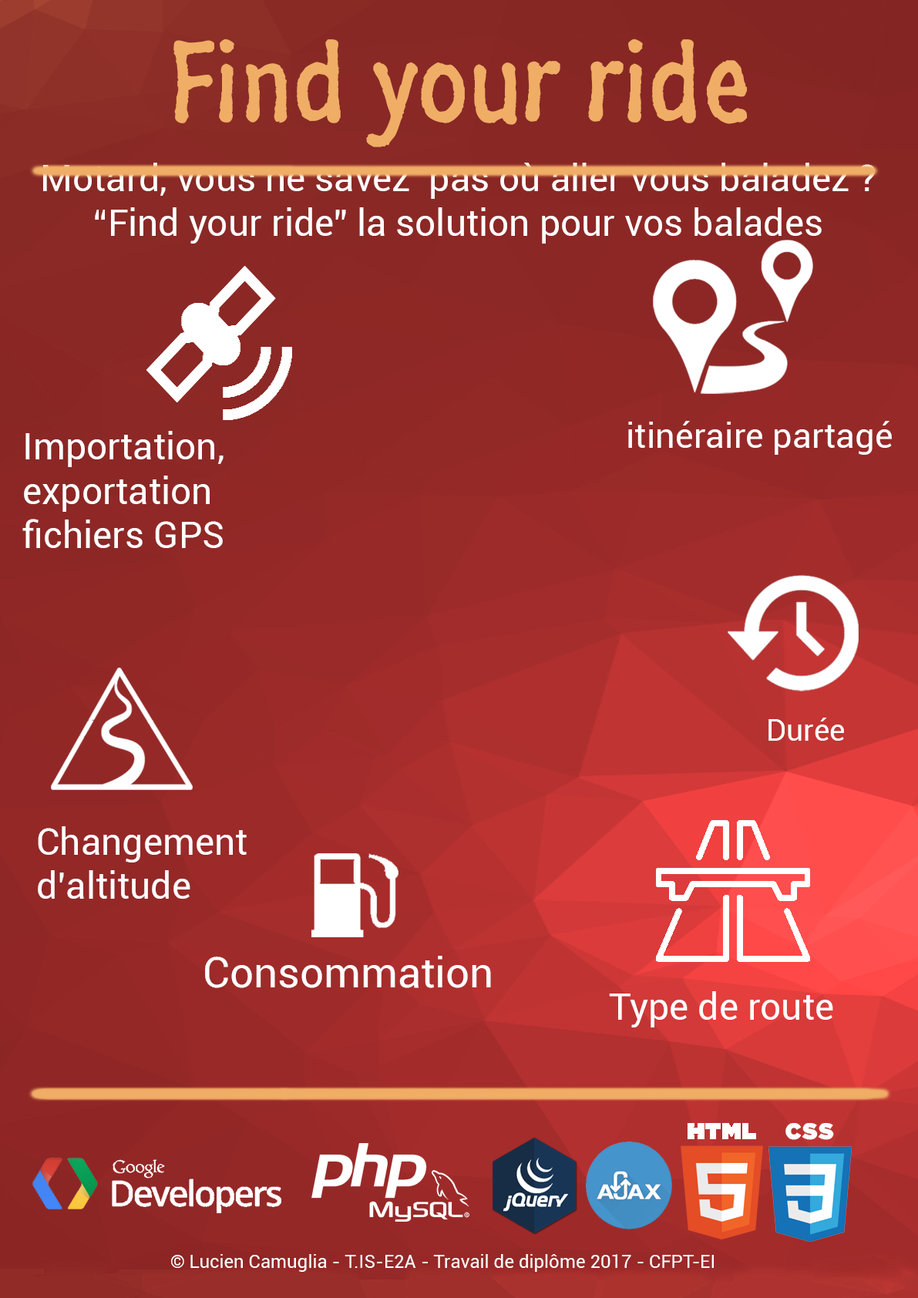
<style>
.page{position:relative;width:918px;height:1298px}
.page>*{position:absolute;margin:0}
.t1{font:115.7px "SegoeMarker";color:#f0ad66}
.t2{font:37px "Roboto-Regular";color:#ffffff}
.t3{font:35px "Roboto-Regular";color:#ffffff}
.t4{font:30.1px "Roboto-Regular";color:#ffffff}
.t5{font:42px "Roboto-Regular";color:#ffffff}
.t6{font:18.5px "Roboto-Regular";color:#fefefe}
</style>
<div class="page">
<p class="t1" style="left:173px;top:39px;width:575px;height:108px">Find your ride</p>
<p class="t2" style="left:43px;top:163px;width:832px;height:81px;text-align:center">Motard, vous ne savez  pas où aller vous baladez ?<br>“Find your ride” la solution pour vos balades</p>
<p class="t3" style="left:628px;top:421px;width:264px;height:34px">itinéraire partagé</p>
<p class="t2" style="left:22px;top:431px;width:202px;height:117px">Importation, exportation fichiers GPS</p>
<p class="t4" style="left:769px;top:718px;width:75px;height:23px">Durée</p>
<p class="t2" style="left:38px;top:827px;width:209px;height:72px">Changement d’altitude</p>
<p class="t5" style="left:205px;top:956px;width:286px;height:33px">Consommation</p>
<p class="t2" style="left:609px;top:992px;width:225px;height:36px">Type de route</p>
<p class="t6" style="left:171px;top:1255px;width:543px;height:17px">© Lucien Camuglia - T.IS-E2A - Travail de diplôme 2017 - CFPT-EI</p>
</div>
